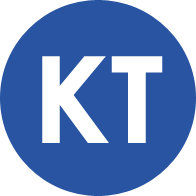
<style>
.page{position:relative;width:196px;height:196px;background:#2854a1}
.page>*{position:absolute;margin:0}
.t1{font:120.5px "CenturyGothic-Bold";color:#ffffff;scale:1.05 1}
</style>
<div class="page">
<p class="t1" style="left:42px;top:56px;width:121px;height:87px">KT</p>
</div>
